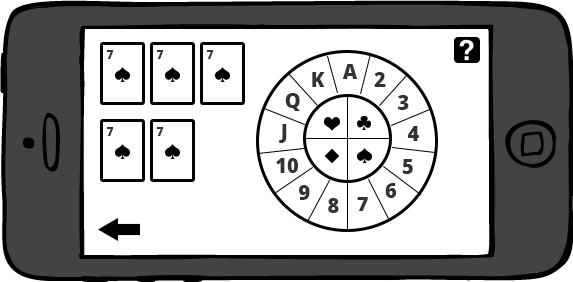
<style>
.page{position:relative;width:573px;height:282px;background:#ffffff}
.page>*{position:absolute;margin:0}
.t1{font:12px "OpenSans-Extrabold";color:#333333;text-transform:uppercase}
.t2{font:20px "OpenSans-Extrabold";color:#333333;text-transform:uppercase}
</style>
<div class="page">
<p class="t1" style="left:107px;top:50px;width:7px;height:9px">7</p>
<p class="t1" style="left:157px;top:50px;width:7px;height:9px">7</p>
<p class="t1" style="left:207px;top:50px;width:7px;height:9px">7</p>
<p class="t2" style="left:342px;top:64px;width:16px;height:15px">A</p>
<p class="t2" style="left:312px;top:72px;width:13px;height:15px">k</p>
<p class="t2" style="left:374px;top:72px;width:12px;height:15px">2</p>
<p class="t2" style="left:285px;top:93px;width:15px;height:18px">Q</p>
<p class="t2" style="left:398px;top:95px;width:11px;height:15px">3</p>
<p class="t2" style="left:279px;top:124px;width:8px;height:19px">J</p>
<p class="t2" style="left:407px;top:126px;width:12px;height:15px">4</p>
<p class="t1" style="left:107px;top:127px;width:7px;height:9px">7</p>
<p class="t1" style="left:157px;top:127px;width:7px;height:9px">7</p>
<p class="t2" style="left:276px;top:158px;width:22px;height:15px">10</p>
<p class="t2" style="left:402px;top:159px;width:11px;height:15px">5</p>
<p class="t2" style="left:299px;top:185px;width:11px;height:15px">9</p>
<p class="t2" style="left:385px;top:183px;width:12px;height:15px">6</p>
<p class="t2" style="left:328px;top:198px;width:11px;height:15px">8</p>
<p class="t2" style="left:357px;top:197px;width:11px;height:14px">7</p>
</div>
